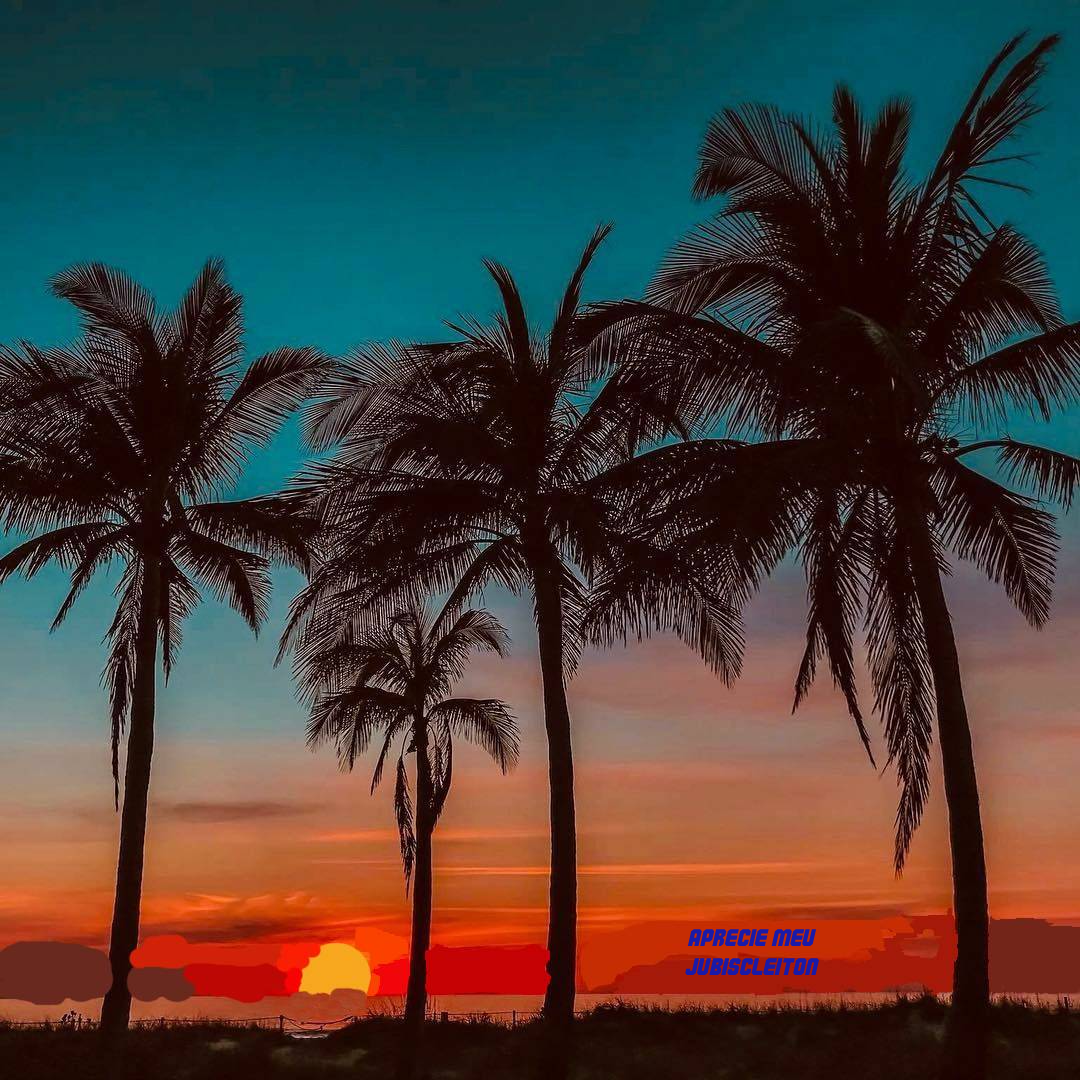
<style>
.page{position:relative;width:1080px;height:1080px}
.page>*{position:absolute;margin:0}
.t1{font:24px "Commando";color:#1a1aa8}
</style>
<div class="page">
<p class="t1" style="left:685px;top:929px;width:134px;height:46px;text-align:center">aprecie meu jubiscleiton</p>
</div>
